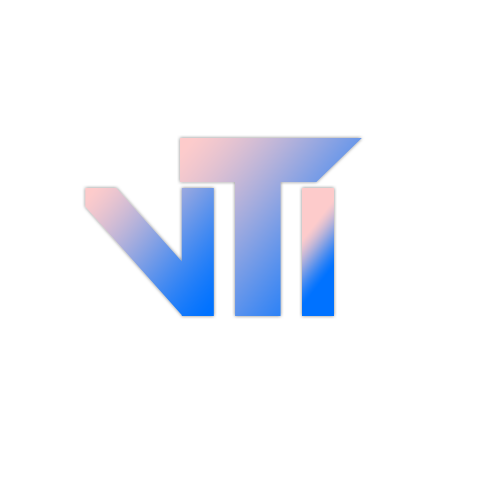
<style>
.page{position:relative;width:500px;height:500px;background:#ffffff}
.page>*{position:absolute;margin:0}
.t1{font:278.3px "MotorBlock"}
.t2{font:200px "MotorBlock"}
</style>
<div class="page">
<p class="t1" style="left:180px;top:138px;width:182px;height:178px">t</p>
<p class="t2" style="left:85px;top:188px;width:129px;height:128px">v</p>
</div>
